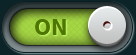
<style>
.page{position:relative;width:136px;height:55px}
.page>*{position:absolute;margin:0}
.t1{font:25px "SourceSansPro-Bold";color:#4e7603}
</style>
<div class="page">
<p class="t1" style="left:35px;top:19px;width:31px;height:16px">ON</p>
</div>
